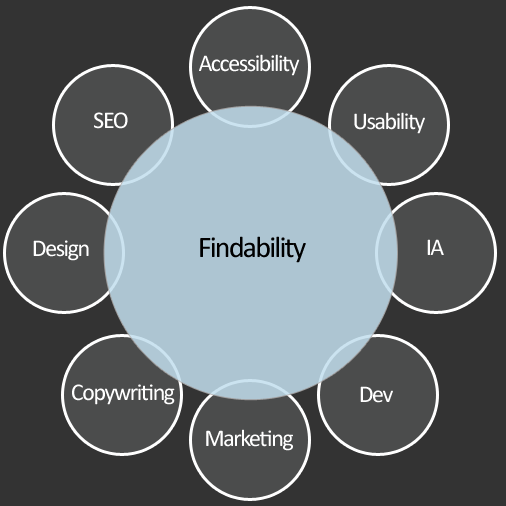
<style>
.page{position:relative;width:506px;height:506px;background:#333333}
.page>*{position:absolute;margin:0}
.t1{font:24px "Calibri";letter-spacing:-0.06em;color:#ffffff}
.t2{font:30px "Calibri";letter-spacing:-0.06em;color:#000000}
</style>
<div class="page">
<p class="t1" style="left:199px;top:54px;width:101px;height:22px">Accessibility</p>
<p class="t1" style="left:94px;top:112px;width:34px;height:17px">SEO</p>
<p class="t1" style="left:354px;top:112px;width:71px;height:22px">Usability</p>
<p class="t1" style="left:33px;top:240px;width:56px;height:21px">Design</p>
<p class="t2" style="left:200px;top:236px;width:106px;height:27px">Findability</p>
<p class="t1" style="left:427px;top:239px;width:17px;height:16px">IA</p>
<p class="t1" style="left:72px;top:384px;width:103px;height:21px">Copywriting</p>
<p class="t1" style="left:360px;top:386px;width:33px;height:17px">Dev</p>
<p class="t1" style="left:206px;top:429px;width:87px;height:22px">Marketing</p>
</div>
